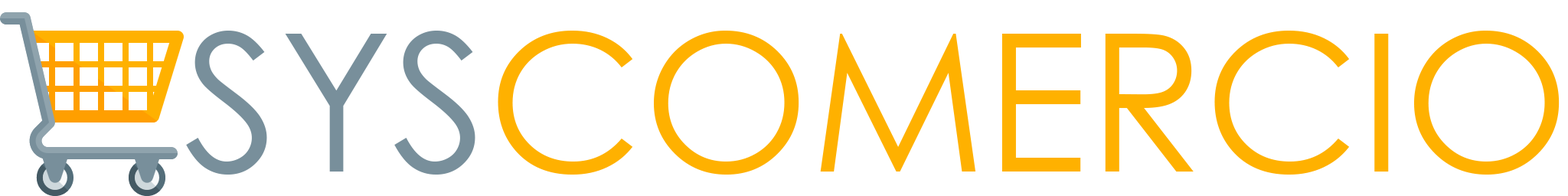
<style>
.page{position:relative;width:1568px;height:196px;background:#ffffff}
.page>*{position:absolute;margin:0}
.t1{font:191.4px "CenturyGothic";color:#ffb100}
.t2{font:191.4px "CenturyGothic";color:#788f9b}
</style>
<div class="page">
<p class="t1" style="left:186px;top:31px;width:1374px;height:144px"><span class="t2">SYS</span>COMERCIO</p>
</div>
